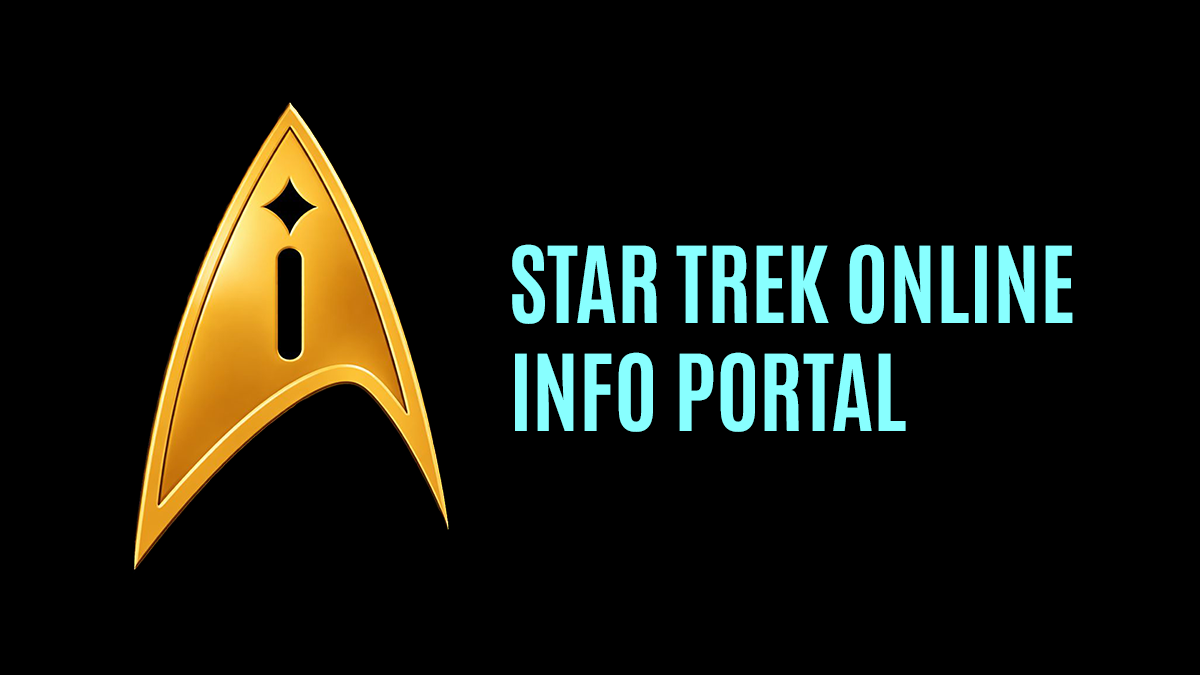
<style>
.page{position:relative;width:1200px;height:675px;background:#000000}
.page>*{position:absolute;margin:0}
.t1{font:90px "Antonio-Bold";color:#88ffff}
</style>
<div class="page">
<p class="t1" style="left:512px;top:244px;width:561px;height:188px">STAR TREK ONLINE<br>INFO PORTAL</p>
</div>
